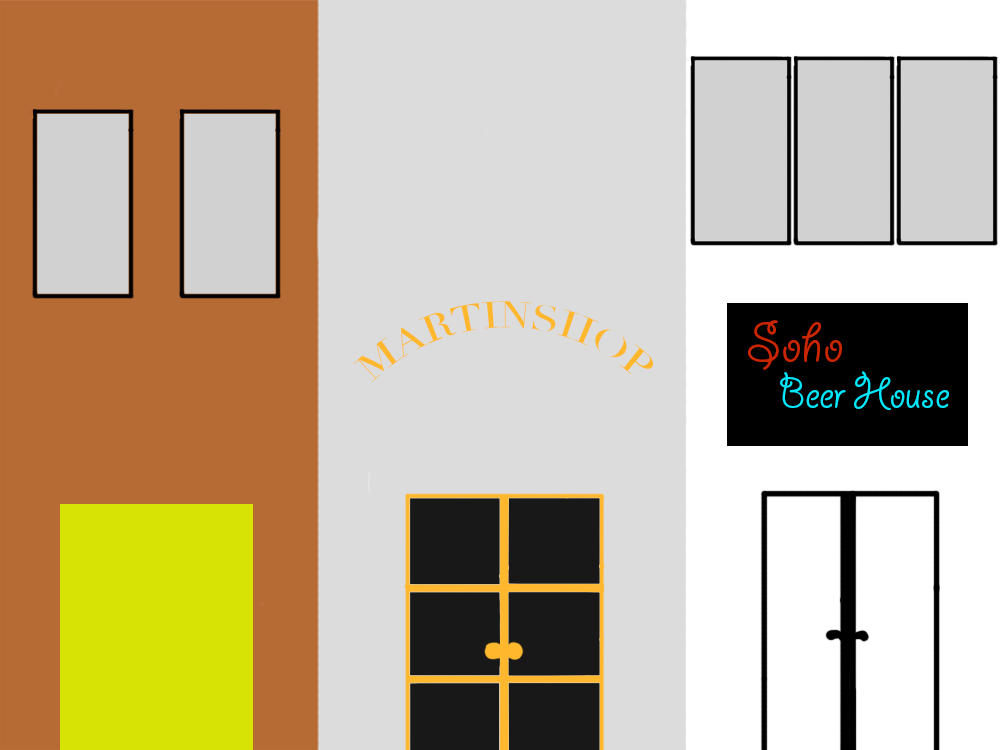
<style>
.page{position:relative;width:1000px;height:750px;background:#dcdcdc}
.page>*{position:absolute;margin:0}
.t1{font:36px "Didot";color:#ffb82e}
.t2{font:60px "GiddyupStd";color:#ca2600}
.t3{font:48px "GiddyupStd";color:#00e8fd}
</style>
<div class="page">
<p class="t1" style="left:353px;top:301px;width:301px;height:82px">MARTINSHOP</p>
<p class="t2" style="left:748px;top:320px;width:94px;height:50px">Soho</p>
<p class="t3" style="left:780px;top:371px;width:169px;height:40px">Beer House</p>
</div>
